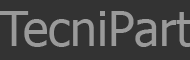
<style>
.page{position:relative;width:190px;height:60px;background:#333333}
.page>*{position:absolute;margin:0}
.t1{font:48px "Tahoma";color:#9a9a9a}
</style>
<div class="page">
<p class="t1" style="left:0px;top:11px;width:192px;height:36px">TecniPart</p>
</div>
